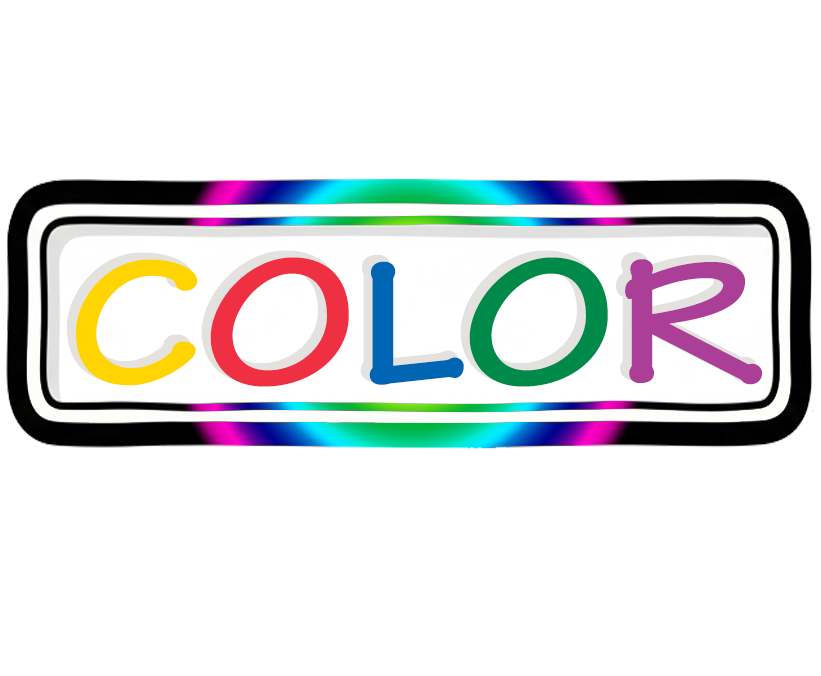
<style>
.page{position:relative;width:821px;height:676px;background:#ffffff}
.page>*{position:absolute;margin:0}
.t1{font:186.8px "TektonPro-BoldExt";color:#ffd400}
.t2{font:186.8px "TektonPro-BoldExt";color:#ee3042}
.t3{font:186.8px "TektonPro-BoldExt";color:#0066b3}
.t4{font:186.8px "TektonPro-BoldExt";color:#008a49}
.t5{font:186.8px "TektonPro-BoldExt";color:#ab3e97}
.t6{font:186.8px "TektonPro-BoldExt";color:#020201}
</style>
<div class="page">
<p class="t1" style="left:76px;top:257px;width:686px;height:130px">C<span class="t2">O</span><span class="t3">L</span><span class="t4">O</span><span class="t5">R</span><span class="t6">E</span></p>
</div>
